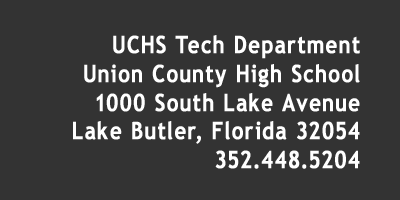
<style>
.page{position:relative;width:400px;height:200px;background:#333333}
.page>*{position:absolute;margin:0}
.t1{font:24px "TrebuchetMS-Bold";letter-spacing:0.075em;color:#ffffff;font-weight:bold;scale:0.85 1}
</style>
<div class="page">
<p class="t1" style="left:73px;top:35px;width:287px;height:134px;text-align:right">UCHS Tech Department<br>Union County High School<br>1000 South Lake Avenue<br>Lake Butler, Florida 32054<br>352.448.5204</p>
</div>
